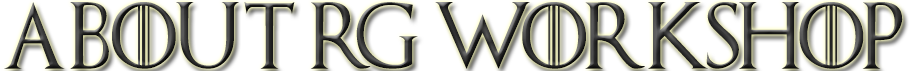
<style>
.page{position:relative;width:921px;height:71px;background:#ffffff}
.page>*{position:absolute;margin:0}
.t1{font:66.7px "GameofThrones";scale:0.96 1}
</style>
<div class="page">
<p class="t1" style="left:4px;top:2px;width:899px;height:67px">ABOUT Rg WORKSHOP</p>
</div>
